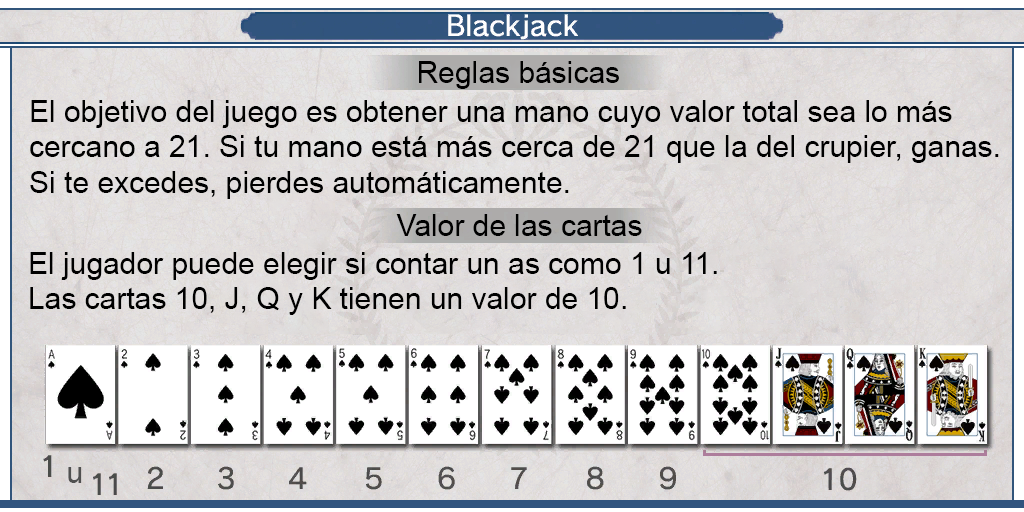
<style>
.page{position:relative;width:1024px;height:512px}
.page>*{position:absolute;margin:0}
.t1{font:30px "ArialMT";color:#000000}
.t2{font:29.9px "ArialMT";color:#000000}
.t3{font:29.6px "ArialMT";color:#000000}
.t4{font:30px "ArialMT";color:#505050}
</style>
<div class="page">
<p class="t1" style="left:419px;top:61px;width:200px;height:28px">Reglas básicas</p>
<p class="t2" style="left:30px;top:100px;width:969px;height:99px;text-align:justify">El objetivo del juego es obtener una mano cuyo valor total sea lo más<br>cercano a 21. Si tu mano está más cerca de 21 que la del crupier, ganas. <br>Si te excedes, pierdes automáticamente.</p>
<p class="t3" style="left:396px;top:214px;width:246px;height:22px">Valor de las cartas</p>
<p class="t2" style="left:30px;top:252px;width:687px;height:63px;text-align:justify">El jugador puede elegir si contar un as como 1 u 11.<br>Las cartas 10, J, Q y K tienen un valor de 10.</p>
<p class="t4" style="left:68px;top:467px;width:14px;height:16px">u</p>
</div>
